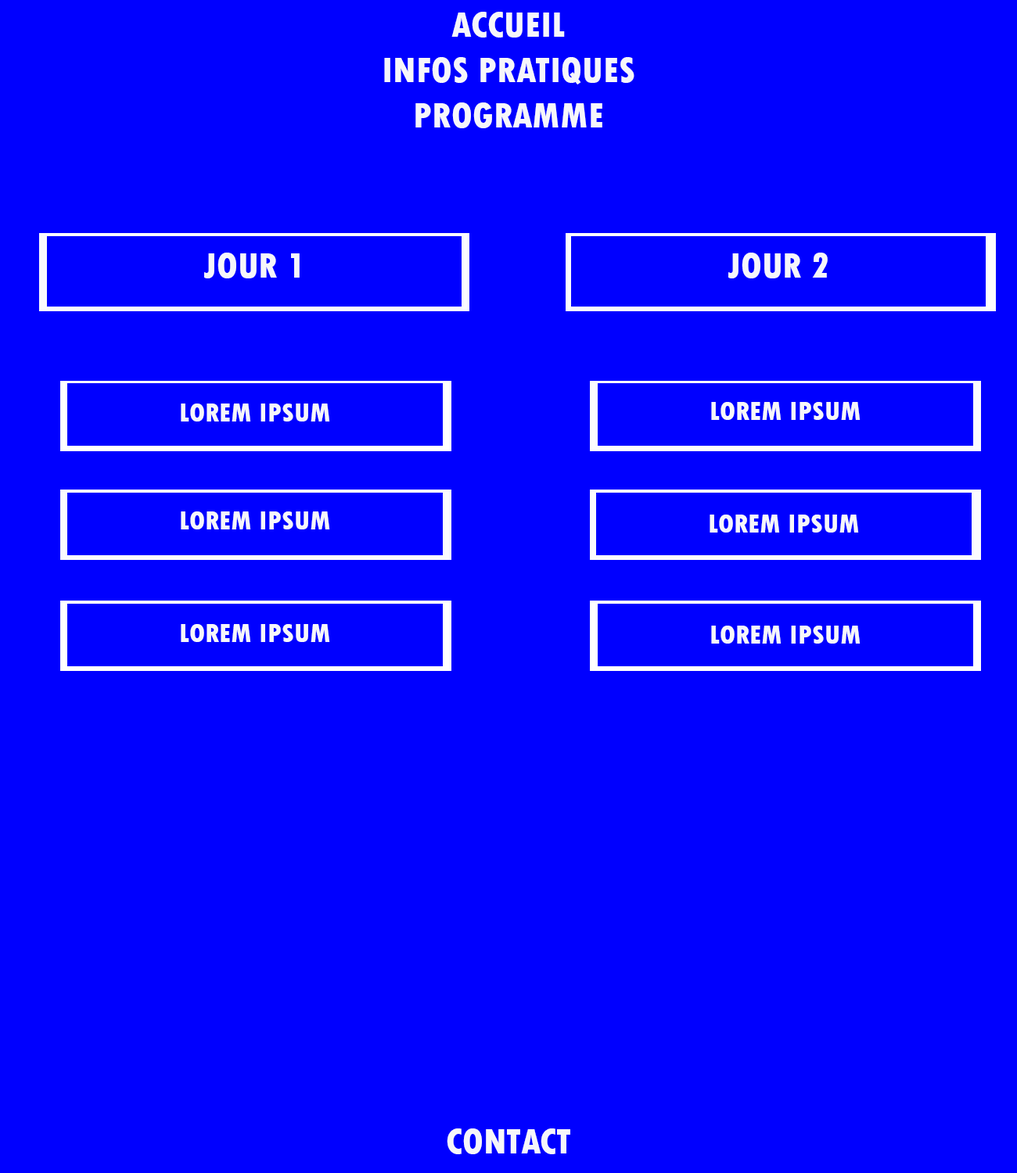
<style>
.page{position:relative;width:1017px;height:1173px;background:#0000ff}
.page>*{position:absolute;margin:0}
.t1{font:37.5px "TwCenMT-CondensedExtraBold";color:#f6f6fa}
.t2{font:28.2px "TwCenMT-CondensedExtraBold";color:#f6f6fa}
</style>
<div class="page">
<p class="t1" style="left:451px;top:12px;width:114px;height:26px">ACCUEIL</p>
<p class="t1" style="left:384px;top:57px;width:250px;height:27px">INFOS PRATIQUES</p>
<p class="t1" style="left:415px;top:102px;width:187px;height:26px">PROGRAMME</p>
<p class="t1" style="left:204px;top:253px;width:96px;height:25px">JOUR 1</p>
<p class="t1" style="left:728px;top:253px;width:99px;height:25px">JOUR 2</p>
<p class="t2" style="left:711px;top:402px;width:149px;height:18px">LOREM IPSUM</p>
<p class="t2" style="left:181px;top:404px;width:149px;height:17px">LOREM IPSUM</p>
<p class="t2" style="left:181px;top:511px;width:149px;height:18px">LOREM IPSUM</p>
<p class="t2" style="left:709px;top:515px;width:150px;height:18px">LOREM IPSUM</p>
<p class="t2" style="left:181px;top:624px;width:149px;height:18px">LOREM IPSUM</p>
<p class="t2" style="left:711px;top:626px;width:149px;height:18px">LOREM IPSUM</p>
<p class="t1" style="left:447px;top:1128px;width:123px;height:26px">CONTACT</p>
</div>
